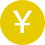
<style>
.page{position:relative;width:45px;height:45px;background:#e8ca00}
.page>*{position:absolute;margin:0}
.t1{font:30px "AdobeHeitiStd-Regular";color:#ffffff}
</style>
<div class="page">
<p class="t1" style="left:13px;top:10px;width:19px;height:23px">￥</p>
</div>
